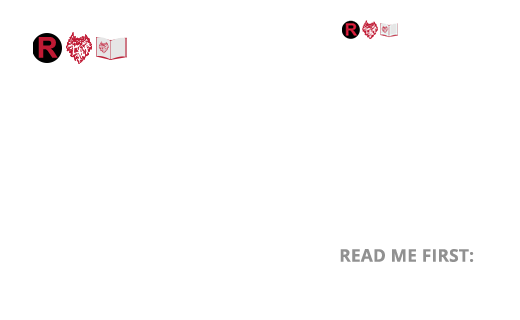
<style>
.page{position:relative;width:520px;height:320px;background:#ffffff}
.page>*{position:absolute;margin:0}
.t1{font:17.4px "OpenSans-Bold";letter-spacing:0.01em;color:#919191}
</style>
<div class="page">
<p class="t1" style="left:340px;top:249px;width:134px;height:13px">READ ME FIRST:</p>
</div>
